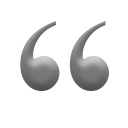
<style>
.page{position:relative;width:128px;height:128px;background:#ffffff}
.page>*{position:absolute;margin:0}
.t1{font:211.1px "TimesNewRomanPS-BoldMT";letter-spacing:0.04em;color:#787878}
</style>
<div class="page">
<p class="t1" style="left:20px;top:21px;width:89px;height:70px">“</p>
</div>
